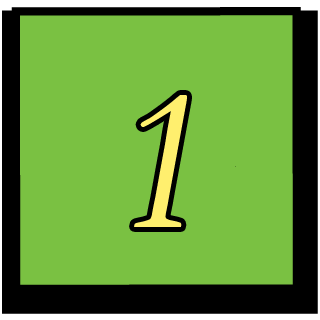
<style>
.page{position:relative;width:320px;height:320px;background:#7ac142}
.page>*{position:absolute;margin:0}
.t1{font:208.3px "Garamond";color:#ffef6e;font-style:italic}
</style>
<div class="page">
<p class="t1" style="left:134px;top:95px;width:53px;height:132px">1</p>
</div>
